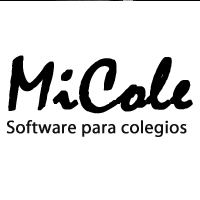
<style>
.page{position:relative;width:200px;height:200px;background:#ffffff}
.page>*{position:absolute;margin:0}
.t1{font:18px "MyriadPro-Regular";color:#121212;font-weight:bold}
.t2{font:78px "Mistral";color:#000000;font-weight:bold}
</style>
<div class="page">
<p class="t1" style="left:6px;top:54px;width:187px;height:82px"><span class="t2">MiCole<br></span>Software para colegios</p>
</div>
